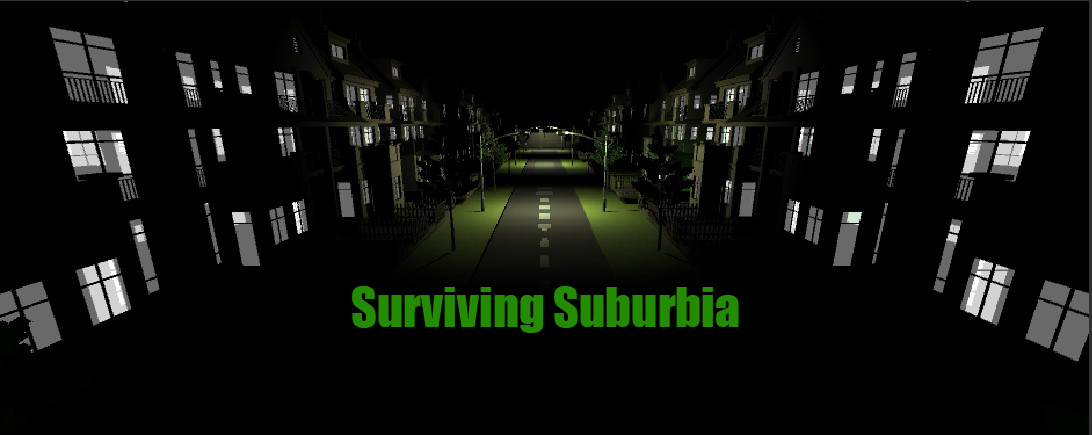
<style>
.page{position:relative;width:1092px;height:435px;background:#000000}
.page>*{position:absolute;margin:0}
.t1{font:50px "Impact";color:#238c03}
</style>
<div class="page">
<p class="t1" style="left:352px;top:286px;width:387px;height:47px">Surviving Suburbia</p>
</div>
